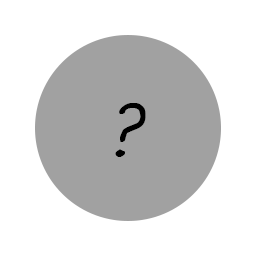
<style>
.page{position:relative;width:256px;height:256px;background:#ffffff}
.page>*{position:absolute;margin:0}
.t1{font:69.4px "SegoeScript";color:#000000}
</style>
<div class="page">
<p class="t1" style="left:115px;top:103px;width:31px;height:54px">?</p>
</div>
